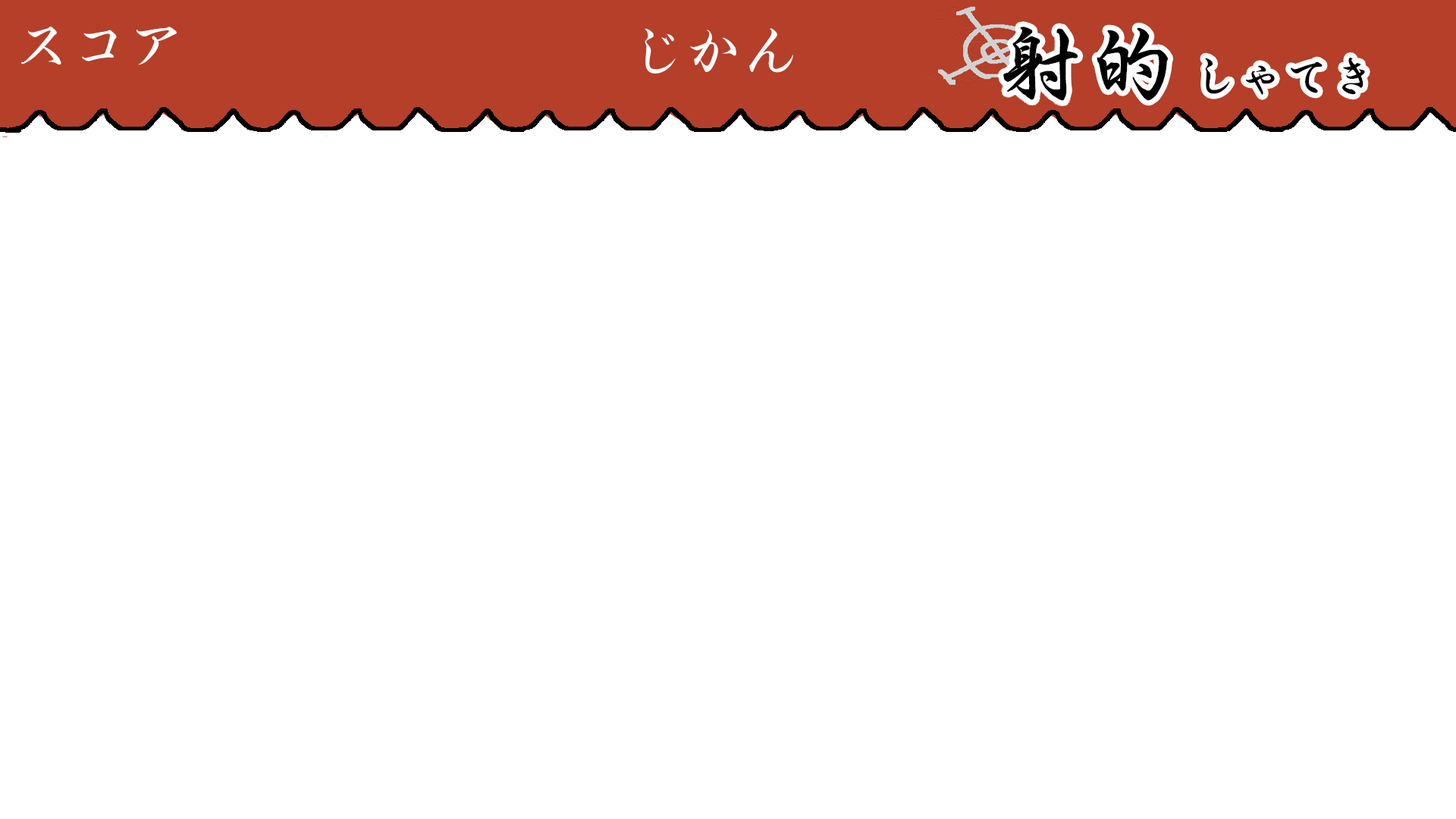
<style>
.page{position:relative;width:1456px;height:819px;background:#ffffff}
.page>*{position:absolute;margin:0}
.t1{font:56.7px "HiraginoGyoDS-W4-90ms-RKSJ-H";color:#ffffff}
.t2{font:82.8px "HiraginoGyoDS-W4-90ms-RKSJ-H";letter-spacing:0.075em;color:#000000;font-weight:bold}
.t3{font:44.2px "HiraginoGyoDS-W4-90ms-RKSJ-H";letter-spacing:0.025em;color:#000000;font-weight:bold}
</style>
<div class="page">
<p class="t1" style="left:21px;top:27px;width:156px;height:38px">スコア</p>
<p class="t1" style="left:645px;top:28px;width:148px;height:46px">じかん</p>
<p class="t2" style="left:1003px;top:27px;width:165px;height:74px">射的</p>
<p class="t3" style="left:1205px;top:58px;width:160px;height:37px">しゃてき</p>
</div>
